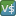
<style>
.page{position:relative;width:16px;height:16px}
.page>*{position:absolute;margin:0}
.t1{font:10px "Verdana";color:#e4e9e7}
</style>
<div class="page">
<p class="t1" style="left:1px;top:4px;width:13px;height:10px">V$</p>
</div>
